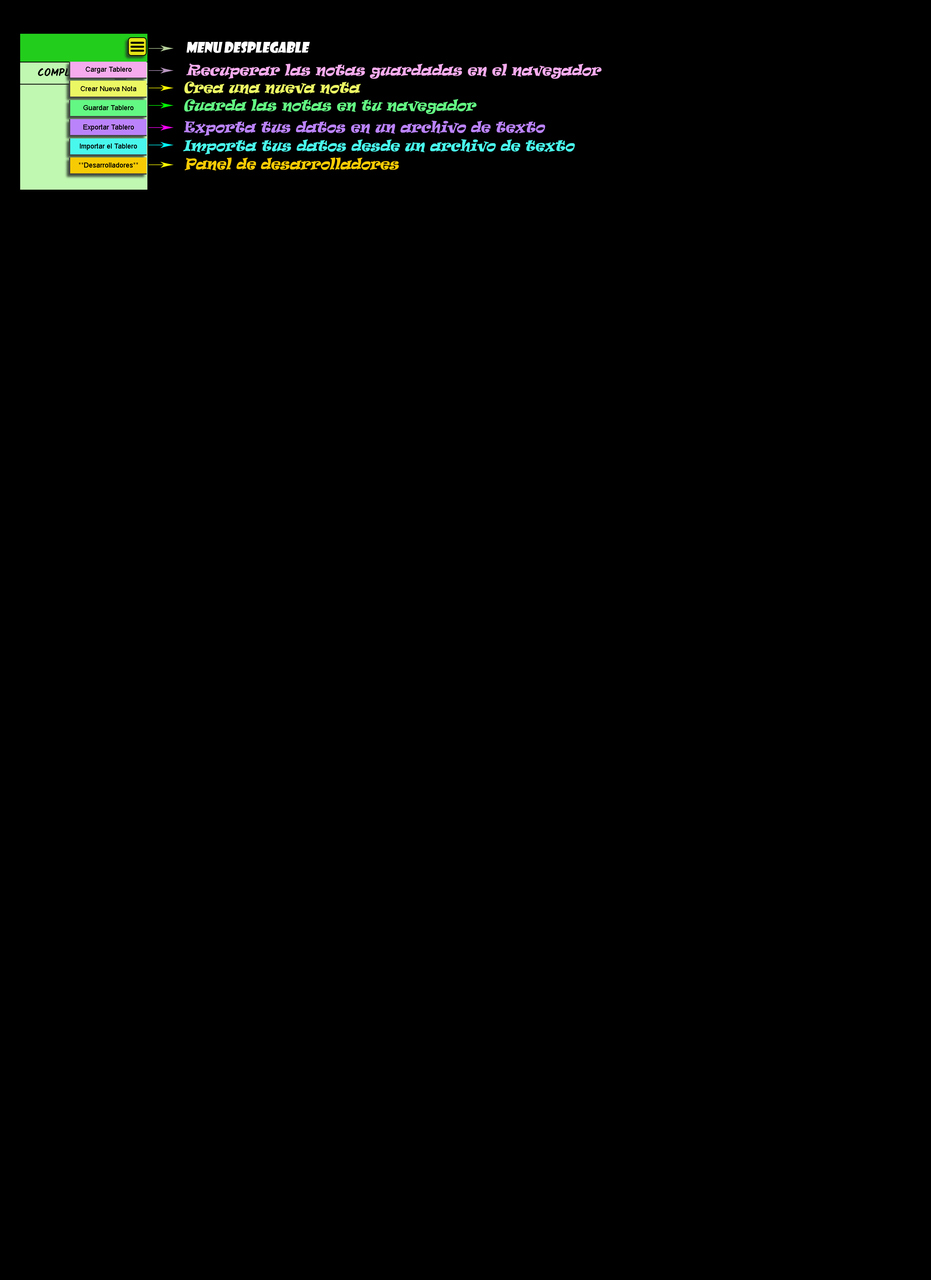
<style>
.page{position:relative;width:931px;height:1280px;background:#000000}
.page>*{position:absolute;margin:0}
.t1{font:14.2px "ShowcardGothic-Reg";color:#ffffff;font-style:italic;scale:0.91 1}
.t2{font:14.2px "Ravie";color:#f5abed;font-style:italic;scale:0.91 1}
.t3{font:14.2px "Ravie";color:#ecf863;font-style:italic;scale:0.91 1}
.t4{font:14.2px "Ravie";color:#63f883;font-style:italic;scale:0.91 1}
.t5{font:14.2px "Ravie";color:#bb83fb;font-style:italic;scale:0.91 1}
.t6{font:14.2px "Ravie";color:#49f8ec;font-style:italic;scale:0.91 1}
.t7{font:14.2px "Ravie";color:#f7cb04;font-style:italic;scale:0.91 1}
</style>
<div class="page">
<p class="t1" style="left:187px;top:42px;width:123px;height:11px">menu desplegable</p>
<p class="t2" style="left:186px;top:63px;width:416px;height:16px">Recuperar las notas guardadas en el navegador</p>
<p class="t3" style="left:184px;top:81px;width:177px;height:13px">Crea una nueva nota</p>
<p class="t4" style="left:184px;top:99px;width:293px;height:15px">Guarda las notas en tu navegador</p>
<p class="t5" style="left:184px;top:121px;width:362px;height:15px">Exporta tus datos en un archivo de texto</p>
<p class="t6" style="left:183px;top:139px;width:392px;height:15px">Importa tus datos desde un archivo de texto</p>
<p class="t7" style="left:185px;top:158px;width:214px;height:13px">Panel de desarrolladores</p>
</div>
